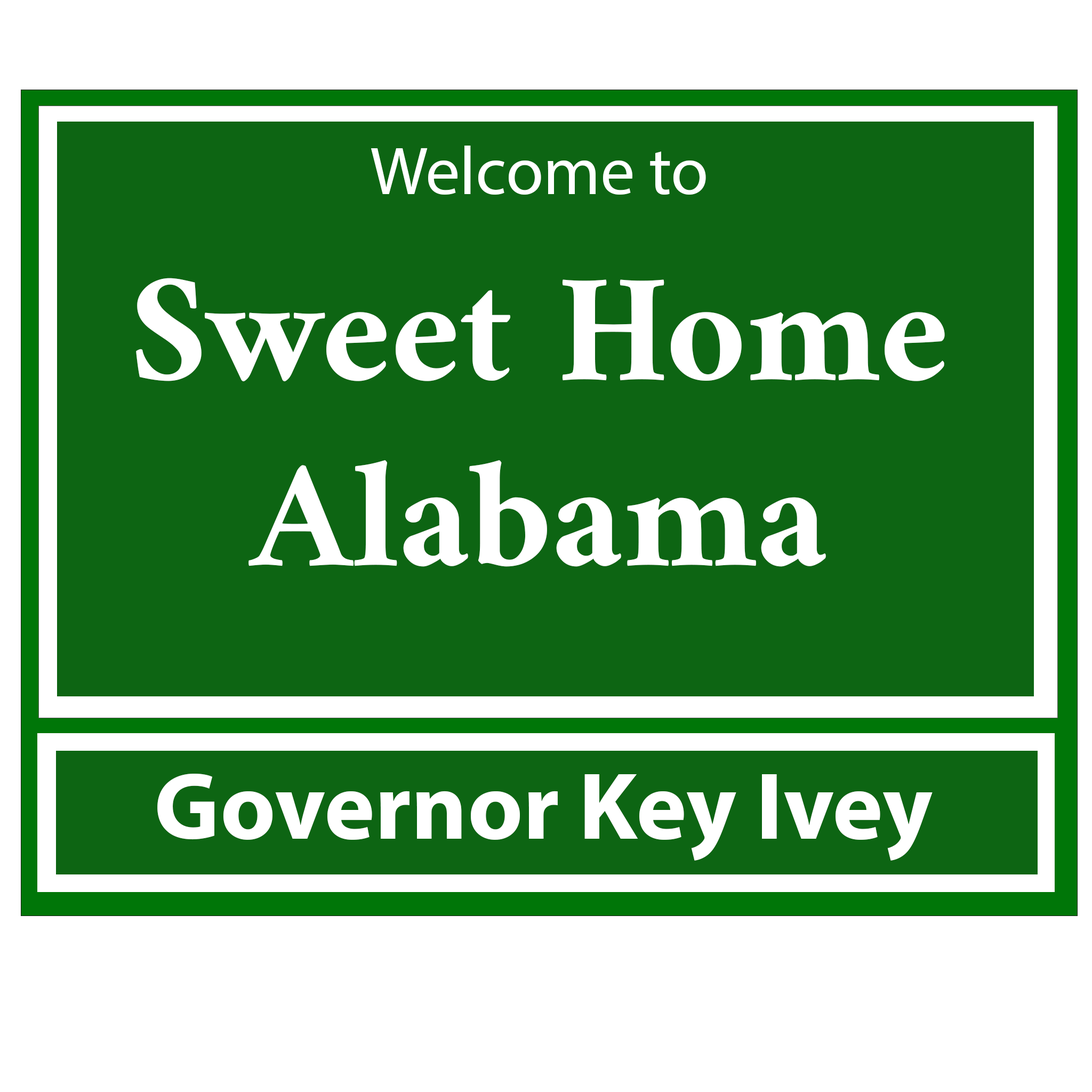
<style>
.page{position:relative;width:1092px;height:1092px;background:#0d6513}
.page>*{position:absolute;margin:0}
.t1{font:154.6px "Amiri-Bold";color:#ffffff}
.t2{font:68.2px "MyriadPro-Regular";color:#ffffff}
.t3{font:96px "MyriadPro-Bold";color:#ffffff}
</style>
<div class="page">
<p class="t1" style="left:136px;top:146px;width:809px;height:421px;text-align:center"><span class="t2">Welcome to<br></span>Sweet Home<br>Alabama</p>
<p class="t3" style="left:157px;top:774px;width:776px;height:87px">Governor Key Ivey</p>
</div>
